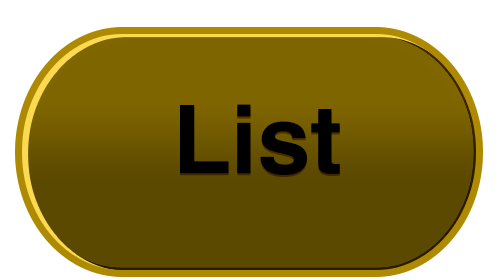
<style>
.page{position:relative;width:498px;height:280px;background:#5c4900}
.page>*{position:absolute;margin:0}
.t1{font:95px "Helvetica-Bold";color:#000000}
</style>
<div class="page">
<p class="t1" style="left:180px;top:104px;width:160px;height:71px">List</p>
</div>
